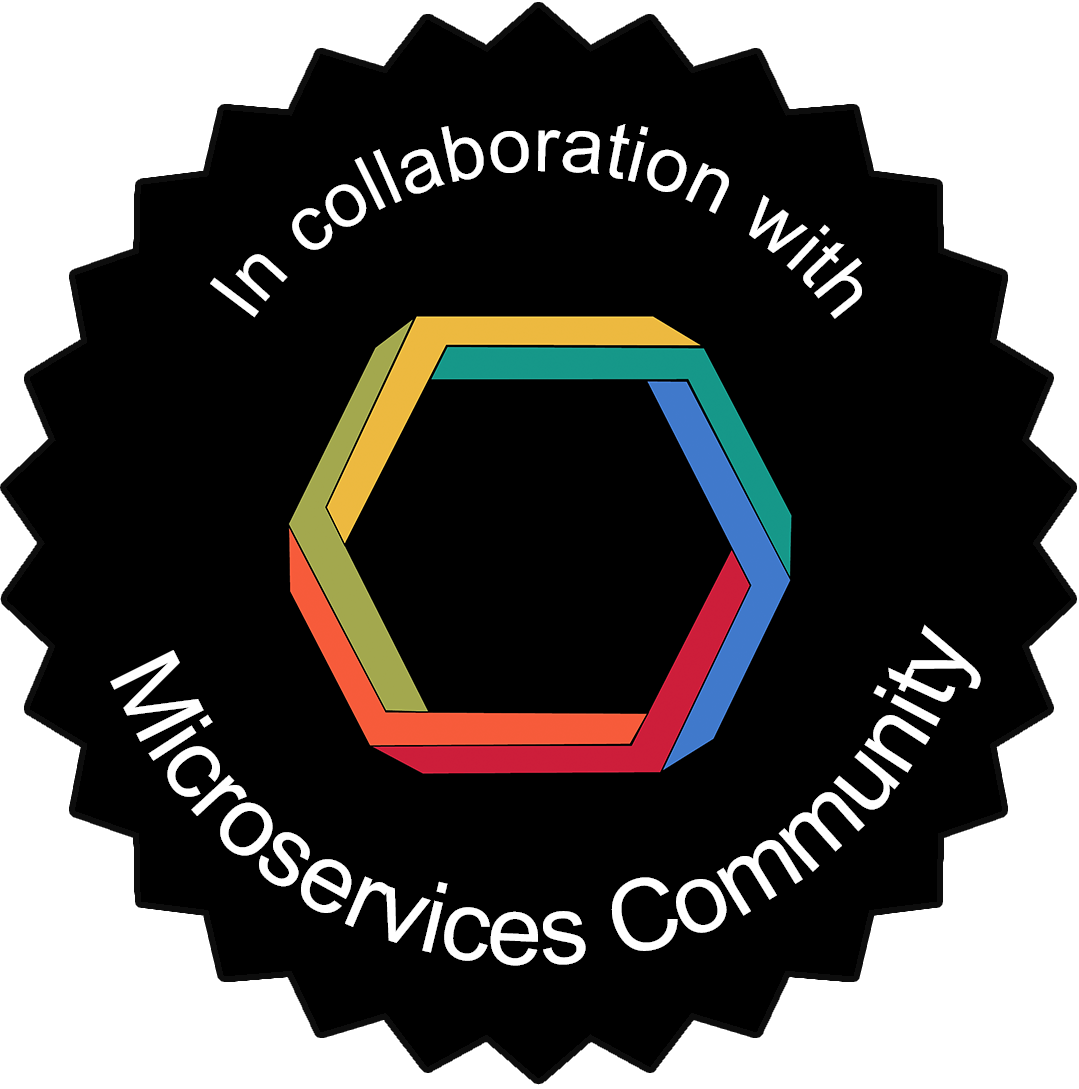
<style>
.page{position:relative;width:1079px;height:1089px;background:#000000}
.page>*{position:absolute;margin:0}
.t1{font:77.8px "ArialMT";color:#ffffff}
.t2{font:98.8px "ArialMT";color:#ffffff}
</style>
<div class="page">
<p class="t1" style="left:210px;top:124px;width:652px;height:195px;text-align:center">In collaboration with</p>
<p class="t2" style="left:110px;top:624px;width:871px;height:342px;text-align:center">Microservices Community</p>
</div>
